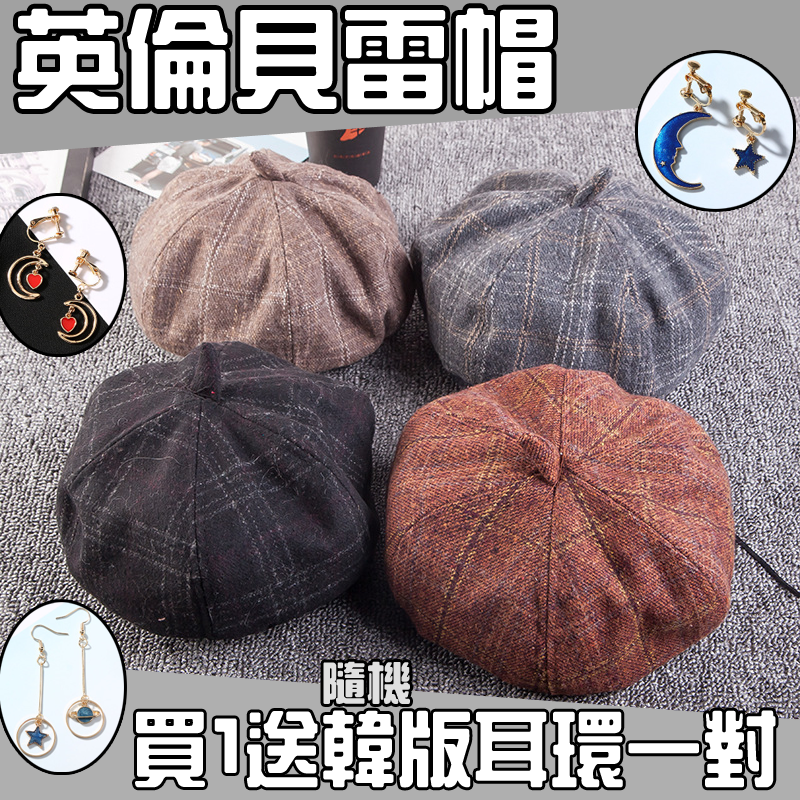
<style>
.page{position:relative;width:800px;height:800px}
.page>*{position:absolute;margin:0}
.t1{font:106.2px "HanWangZonYi";color:#ffffff;font-weight:bold}
.t2{font:44.1px "HanWangZonYi";color:#e0e0e0;font-weight:bold}
.t3{font:80.9px "HanWangZonYi";color:#ffffff;font-weight:bold;scale:0.92 1}
</style>
<div class="page">
<p class="t1" style="left:18px;top:8px;width:535px;height:102px">英倫貝雷帽</p>
<p class="t2" style="left:323px;top:661px;width:87px;height:43px">隨機</p>
<p class="t3" style="left:135px;top:710px;width:641px;height:78px">買1送韓版耳環一對</p>
</div>
